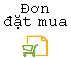
<style>
.page{position:relative;width:71px;height:58px;background:#ffffff}
.page>*{position:absolute;margin:0}
.t1{font:12px/13.3px "CourierNewPSMT";color:#000000}
</style>
<div class="page">
<p class="t1" style="left:4px;top:4px;width:63px;height:25px;text-align:center">Đơn<br>đặt mua</p>
</div>
